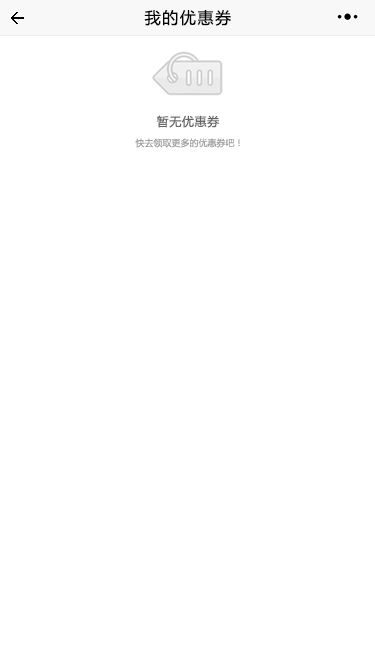
<style>
.page{position:relative;width:375px;height:667px;background:#ffffff}
.page>*{position:absolute;margin:0}
.t1{font:16px "MicrosoftYaHei";letter-spacing:0.1em;color:#020202}
.t2{font:12px "MicrosoftYaHei";letter-spacing:0.05em;color:#646464}
.t3{font:9px "MicrosoftYaHei";color:#9f9f9f}
</style>
<div class="page">
<p class="t1" style="left:144px;top:10px;width:87px;height:16px">我的优惠券</p>
<p class="t2" style="left:156px;top:115px;width:63px;height:13px">暂无优惠券</p>
<p class="t3" style="left:135px;top:138px;width:105px;height:10px">快去领取更多的优惠券吧！</p>
</div>
